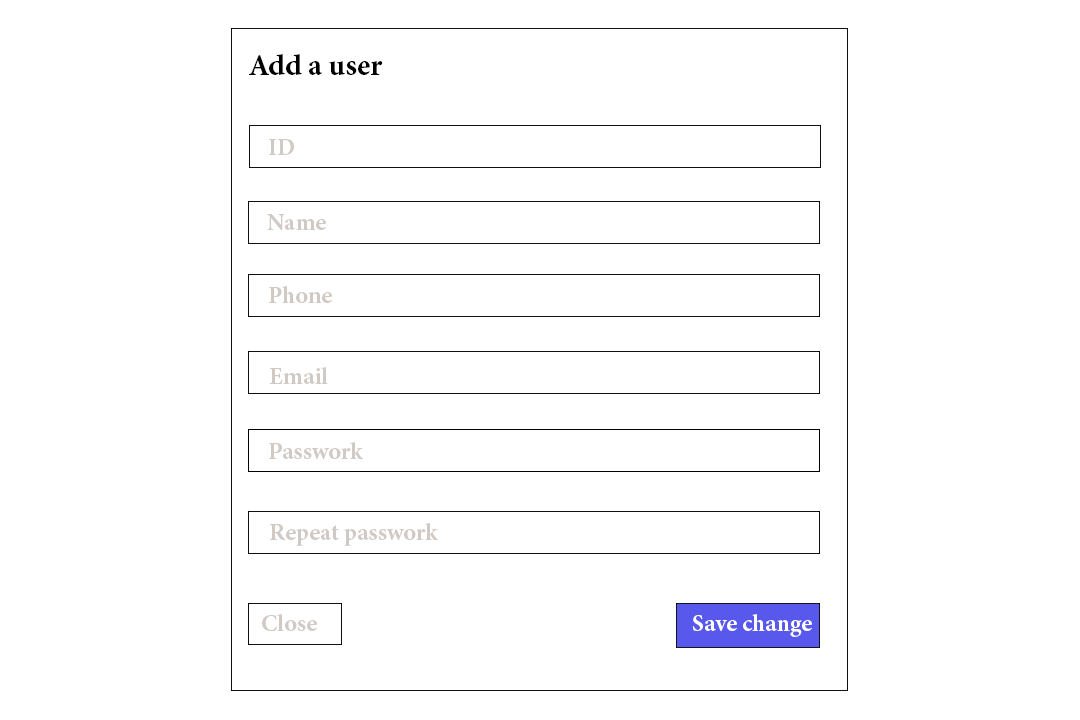
<style>
.page{position:relative;width:1080px;height:720px;background:#ffffff}
.page>*{position:absolute;margin:0}
.t1{font:30px "MinionPro-Bold";color:#000000}
.t2{font:24px "MinionPro-Bold";color:#d0c9c4;text-transform:uppercase}
.t3{font:24px "MinionPro-Bold";color:#d0c9c4}
.t4{font:24px "MinionPro-Bold";color:#ffffff}
</style>
<div class="page">
<p class="t1" style="left:249px;top:54px;width:134px;height:22px">Add a user</p>
<p class="t2" style="left:269px;top:139px;width:25px;height:16px">ID</p>
<p class="t3" style="left:267px;top:214px;width:59px;height:16px">Name</p>
<p class="t3" style="left:269px;top:286px;width:63px;height:17px">Phone</p>
<p class="t3" style="left:269px;top:367px;width:59px;height:17px">Email</p>
<p class="t3" style="left:269px;top:442px;width:94px;height:17px">Passwork</p>
<p class="t3" style="left:270px;top:523px;width:168px;height:23px">Repeat passwork</p>
<p class="t3" style="left:262px;top:614px;width:55px;height:17px">Close</p>
<p class="t4" style="left:692px;top:614px;width:120px;height:23px">Save change</p>
</div>
